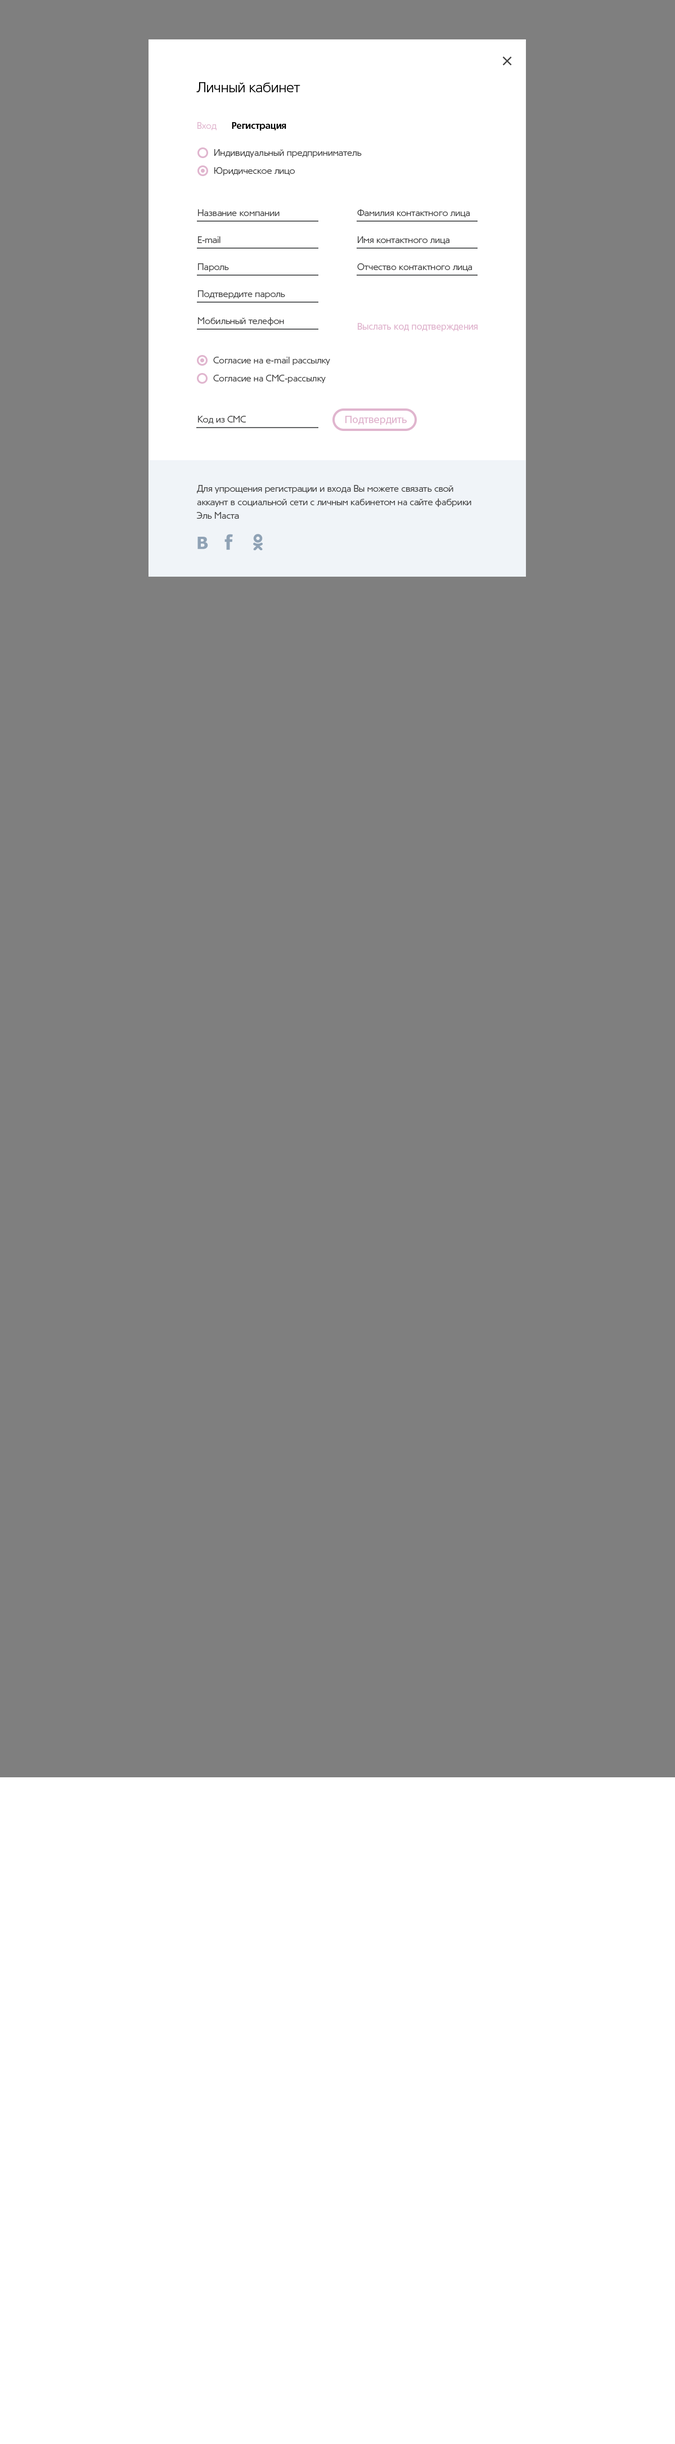
<style>
.page{position:relative;width:675px;height:2444px;background:#7f7f7f}
.page>*{position:absolute;margin:0}
.t1{font:22.4px "TornadoCyr-Light";color:#414141}
.t2{font:13.6px "TornadoCyr-Light";color:#000000}
.t3{font:9px "TornadoCyr-Bold";color:#000000}
.t4{font:9px "TornadoCyr-Light";color:#e0b5ce}
.t5{font:9px/18px "TornadoCyr-Light";color:#414141}
.t6{font:9px/13.5px "TornadoCyr-Light";color:#414141}
.t7{font:9px "TornadoCyr-Regular";color:#e0b5ce}
.t8{font:9px "TornadoCyr-Light";color:#414141}
.t9{font:10.1px "TornadoCyr-Regular";color:#e0b5ce}
</style>
<div class="page">
<p class="t1" style="left:502px;top:56px;width:10px;height:10px;rotate:45deg">+</p>
<p class="t2" style="left:196px;top:82px;width:104px;height:10px">Личный кабинет</p>
<p class="t3" style="left:197px;top:122px;width:89px;height:9px"><span class="t4">Вход      </span>Регистрация</p>
<p class="t5" style="left:214px;top:149px;width:148px;height:27px">Индивидуальный предприниматель<br>Юридическое лицо</p>
<p class="t6" style="left:198px;top:209px;width:87px;height:117px">Название компании<br><br>E-mail<br><br>Пароль<br><br>Подтвердите пароль<br><br>Мобильный телефон</p>
<p class="t6" style="left:357px;top:209px;width:115px;height:63px">Фамилия контактного лица<br><br>Имя контактного лица<br><br>Отчество контактного лица</p>
<p class="t7" style="left:358px;top:323px;width:120px;height:8px">Выслать код подтверждения</p>
<p class="t5" style="left:213px;top:357px;width:117px;height:26px">Согласие на e-mail рассылку<br>Согласие на СМС-рассылку</p>
<p class="t8" style="left:198px;top:416px;width:48px;height:8px">Код из СМС</p>
<p class="t9" style="left:345px;top:416px;width:62px;height:9px">Подтвердить</p>
<p class="t6" style="left:197px;top:485px;width:274px;height:34px">Для упрощения регистрации и входа Вы можете связать свой <br>аккаунт в социальной сети с личным кабинетом на сайте фабрики <br>Эль Маста</p>
</div>
